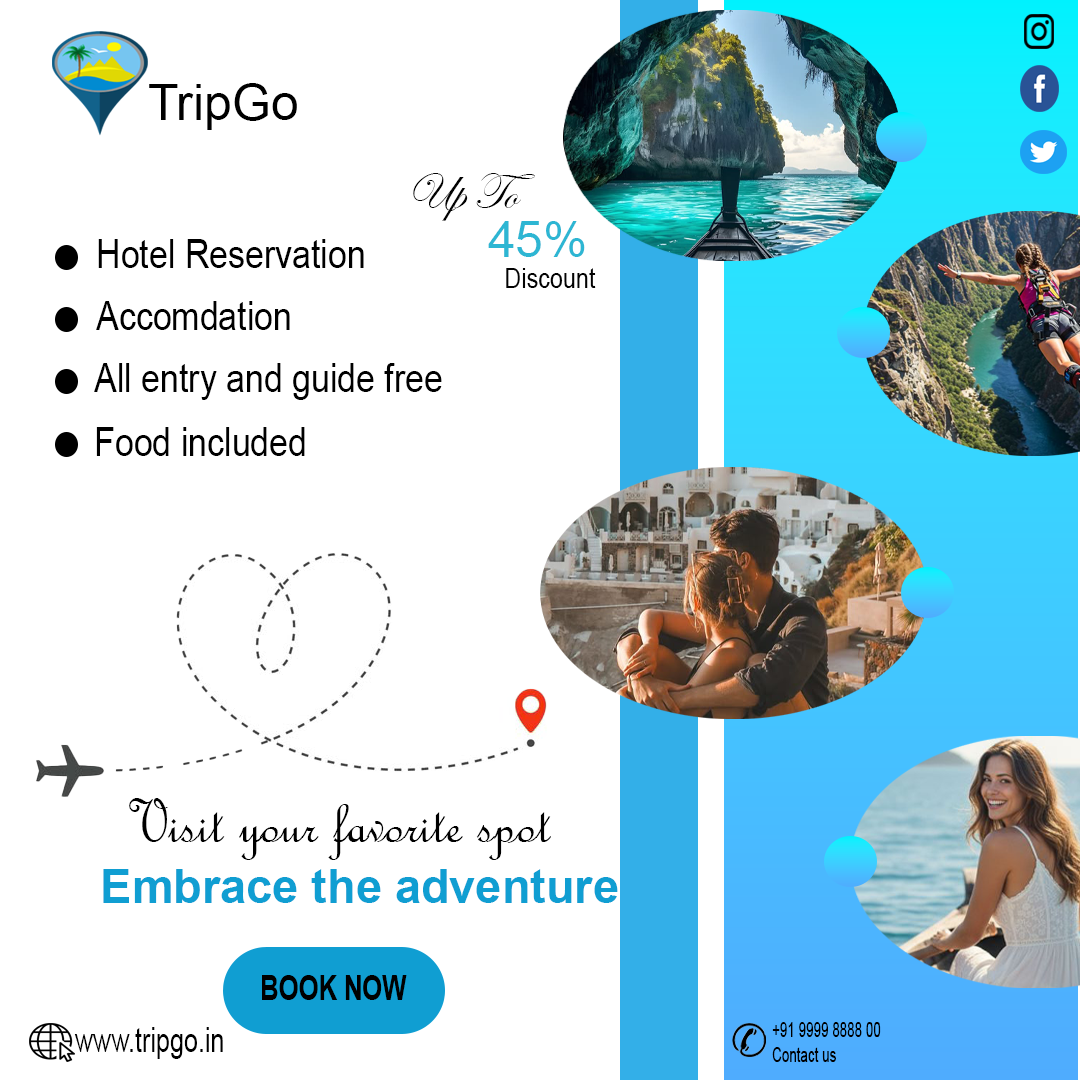
<style>
.page{position:relative;width:1080px;height:1080px;background:#ffffff}
.page>*{position:absolute;margin:0}
.t1{font:50px "ArialMT";color:#000000}
.t2{font:50px "EdwardianScriptITC";color:#020202}
.t3{font:50px "ArialMT";color:#2db6d3}
.t4{font:40.3px "ArialMT";color:#000000;scale:0.84 1}
.t5{font:26.9px "ArialMT";color:#020202;scale:0.87 1}
.t6{font:63.5px "FrenchScriptMT";color:#000000}
.t7{font:46.9px "Arial-BoldMT";color:#109ed2}
.t8{font:35.2px "Arial-BoldMT";color:#000000;scale:0.72 1}
.t9{font:20.3px "ArialMT";color:#000000;scale:0.66 1}
.t10{font:34px "ArialMT";color:#000000;scale:0.74 1}
</style>
<div class="page">
<p class="t1" style="left:149px;top:83px;width:148px;height:47px">TripGo</p>
<p class="t2" style="left:413px;top:173px;width:122px;height:48px">Up To</p>
<p class="t3" style="left:488px;top:221px;width:97px;height:36px">45%</p>
<p class="t4" style="left:98px;top:239px;width:266px;height:29px">Hotel Reservation</p>
<p class="t5" style="left:506px;top:268px;width:90px;height:20px">Discount</p>
<p class="t4" style="left:96px;top:301px;width:194px;height:29px">Accomdation</p>
<p class="t4" style="left:94px;top:363px;width:348px;height:37px">All entry and guide free</p>
<p class="t4" style="left:96px;top:427px;width:209px;height:29px">Food included</p>
<p class="t6" style="left:129px;top:798px;width:422px;height:62px">Visit your favorite spot</p>
<p class="t7" style="left:103px;top:869px;width:515px;height:34px">Embrace the adventure</p>
<p class="t8" style="left:262px;top:975px;width:145px;height:25px">BOOK NOW</p>
<p class="t9" style="left:772px;top:1022px;width:109px;height:40px">+91 9999 8888 00<br>Contact us</p>
<p class="t10" style="left:74px;top:1027px;width:149px;height:32px">www.tripgo.in</p>
</div>
